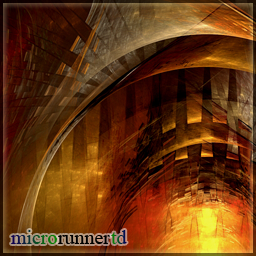
<style>
.page{position:relative;width:256px;height:256px}
.page>*{position:absolute;margin:0}
.t1{font:20px "TimesNewRomanPSMT";letter-spacing:-0.003em}
.t2{font:20px "TimesNewRomanPSMT";letter-spacing:-0.003em;color:#000000}
</style>
<div class="page">
<p class="t1" style="left:11px;top:230px;width:46px;height:14px">micro</p>
<p class="t1" style="left:111px;top:230px;width:16px;height:14px">td</p>
<p class="t2" style="left:58px;top:235px;width:52px;height:9px">runner</p>
</div>
